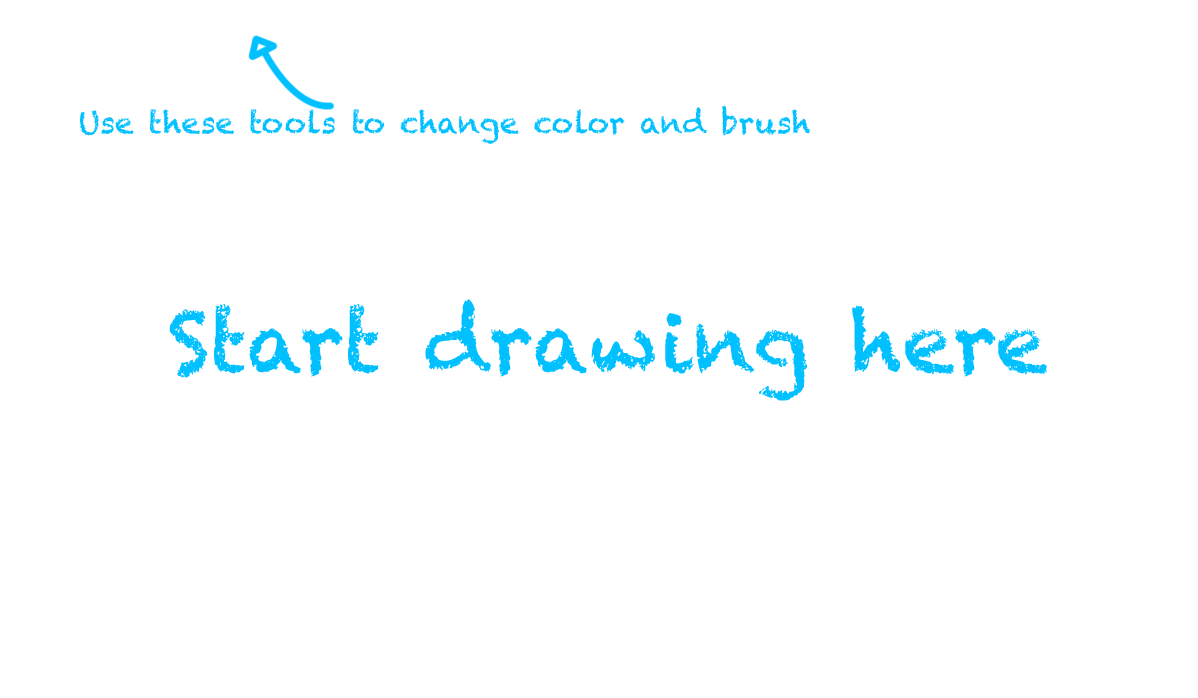
<style>
.page{position:relative;width:1198px;height:698px;background:#ffffff}
.page>*{position:absolute;margin:0}
.t1{font:30px "Chalkduster";color:#00c0ff}
.t2{font:83.3px "Chalkduster";color:#00c0ff}
</style>
<div class="page">
<p class="t1" style="left:80px;top:105px;width:730px;height:39px">Use these tools to change color and brush</p>
<p class="t2" style="left:169px;top:299px;width:879px;height:102px">Start drawing here</p>
</div>
